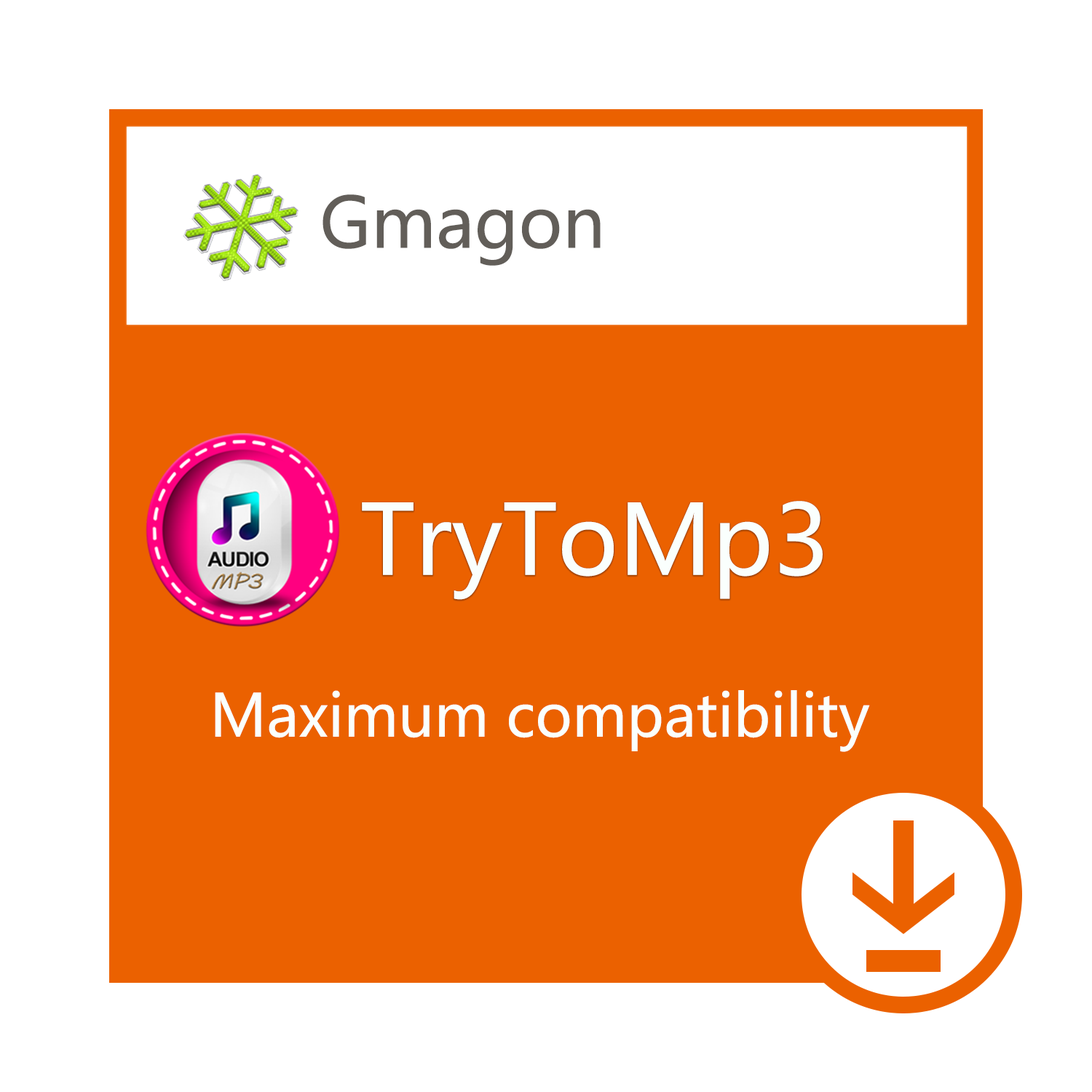
<style>
.page{position:relative;width:1092px;height:1092px;background:#ffffff}
.page>*{position:absolute;margin:0}
.t1{font:69.3px "MicrosoftYaHei";color:#625e59}
.t2{font:95.9px "MicrosoftYaHei";color:#fafffd}
.t3{font:58.2px "MicrosoftYaHei";color:#fafffd}
</style>
<div class="page">
<p class="t1" style="left:322px;top:194px;width:279px;height:72px">Gmagon</p>
<p class="t2" style="left:362px;top:501px;width:461px;height:99px">TryToMp3</p>
<p class="t3" style="left:215px;top:690px;width:655px;height:62px">Maximum compatibility</p>
</div>
